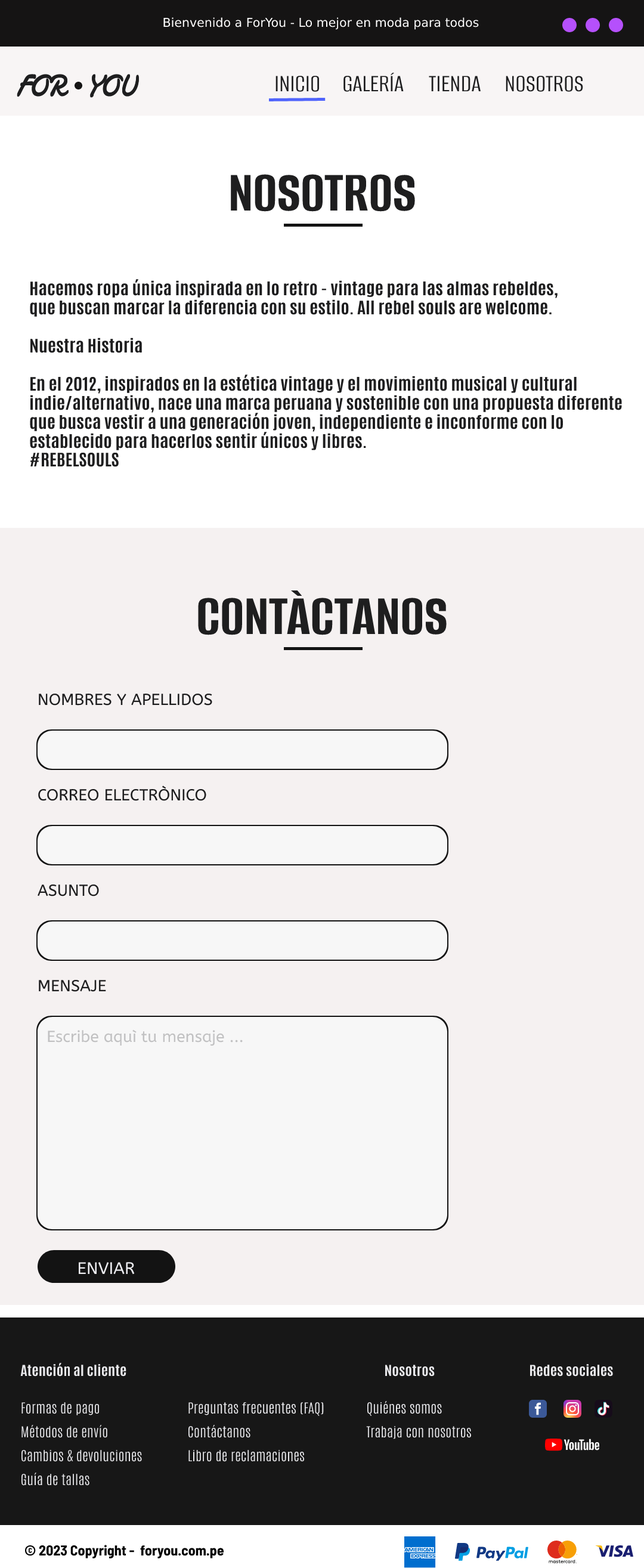
<style>
.page{position:relative;width:644px;height:1568px;background:#f5f1f1}
.page>*{position:absolute;margin:0}
.t1{font:12.2px "DejaVuSans";color:#ffffff}
.t2{font:29.3px "Damion";color:#1e1e1f}
.t3{font:25.8px "AlumniSans-Regular";color:#1e1e1f}
.t4{font:60.1px "AlumniSans-Bold";color:#1e1e1f}
.t5{font:15.9px "Antonio-Bold";color:#1e1e1f;scale:1.15 1}
.t6{font:16px "ABeeZee-Regular";color:#1e1e1f}
.t7{font:16px "ABeeZee-Regular";color:#c1c1c2}
.t8{font:16.7px "ABeeZee-Regular";color:#ededf1}
.t9{font:12.9px "Antonio-Bold";color:#e9e9ec;scale:1.14 1}
.t10{font:12.9px "Antonio-Thin";color:#e9e9ec;scale:1.14 1}
.t11{font:14.3px "BarlowSemiCondensed-Bold";color:#000000}
</style>
<div class="page">
<p class="t1" style="left:163px;top:17px;width:316px;height:13px">Bienvenido a ForYou - Lo mejor en moda para todos</p>
<p class="t2" style="left:17px;top:74px;width:122px;height:23px">FOR   YOU</p>
<p class="t2" style="left:17px;top:75px;width:122px;height:23px">FOR   YOU</p>
<p class="t3" style="left:276px;top:76px;width:44px;height:16px">INICIO</p>
<p class="t3" style="left:344px;top:73px;width:60px;height:19px">GALERÍA</p>
<p class="t3" style="left:429px;top:76px;width:52px;height:15px">TIENDA</p>
<p class="t3" style="left:506px;top:76px;width:77px;height:16px">NOSOTROS</p>
<p class="t4" style="left:231px;top:174px;width:184px;height:38px">NOSOTROS</p>
<p class="t5" style="left:30px;top:279px;width:592px;height:188px">Hacemos ropa única inspirada en lo retro - vintage para las almas rebeldes, <br>que buscan marcar la diferencia con su estilo. All rebel souls are welcome.<br><br>Nuestra Historia<br><br>En el 2012, inspirados en la estética vintage y el movimiento musical y cultural <br>indie/alternativo, nace una marca peruana y sostenible con una propuesta diferente <br>que busca vestir a una generación joven, independiente e inconforme con lo <br>establecido para hacerlos sentir únicos y libres.<br>#REBELSOULS</p>
<p class="t4" style="left:198px;top:590px;width:249px;height:45px">CONTÀCTANOS</p>
<p class="t6" style="left:39px;top:693px;width:173px;height:13px">NOMBRES Y APELLIDOS</p>
<p class="t6" style="left:38px;top:785px;width:168px;height:16px">CORREO ELECTRÒNICO</p>
<p class="t6" style="left:38px;top:884px;width:61px;height:12px">ASUNTO</p>
<p class="t6" style="left:39px;top:979px;width:67px;height:13px">MENSAJE</p>
<p class="t7" style="left:48px;top:1029px;width:195px;height:17px">Escribe aquì tu mensaje ...</p>
<p class="t8" style="left:79px;top:1262px;width:56px;height:13px">ENVIAR</p>
<p class="t9" style="left:20px;top:1363px;width:106px;height:14px">Atención al cliente</p>
<p class="t9" style="left:385px;top:1365px;width:50px;height:12px">Nosotros</p>
<p class="t9" style="left:530px;top:1364px;width:83px;height:13px">Redes sociales</p>
<p class="t10" style="left:21px;top:1402px;width:79px;height:13px">Formas de pago</p>
<p class="t10" style="left:188px;top:1402px;width:136px;height:15px">Preguntas frecuentes (FAQ)</p>
<p class="t10" style="left:367px;top:1401px;width:75px;height:16px">Quiénes somos</p>
<p class="t10" style="left:21px;top:1425px;width:86px;height:13px">Métodos de envío</p>
<p class="t10" style="left:188px;top:1425px;width:62px;height:13px">Contáctanos</p>
<p class="t10" style="left:366px;top:1426px;width:105px;height:13px">Trabaja con nosotros</p>
<p class="t10" style="left:21px;top:1450px;width:121px;height:12px">Cambios &amp; devoluciones</p>
<p class="t10" style="left:188px;top:1450px;width:117px;height:12px">Libro de reclamaciones</p>
<p class="t10" style="left:21px;top:1473px;width:68px;height:13px">Guía de tallas</p>
<p class="t11" style="left:24px;top:1545px;width:200px;height:13px">© 2023 Copyright -  foryou.com.pe</p>
</div>
